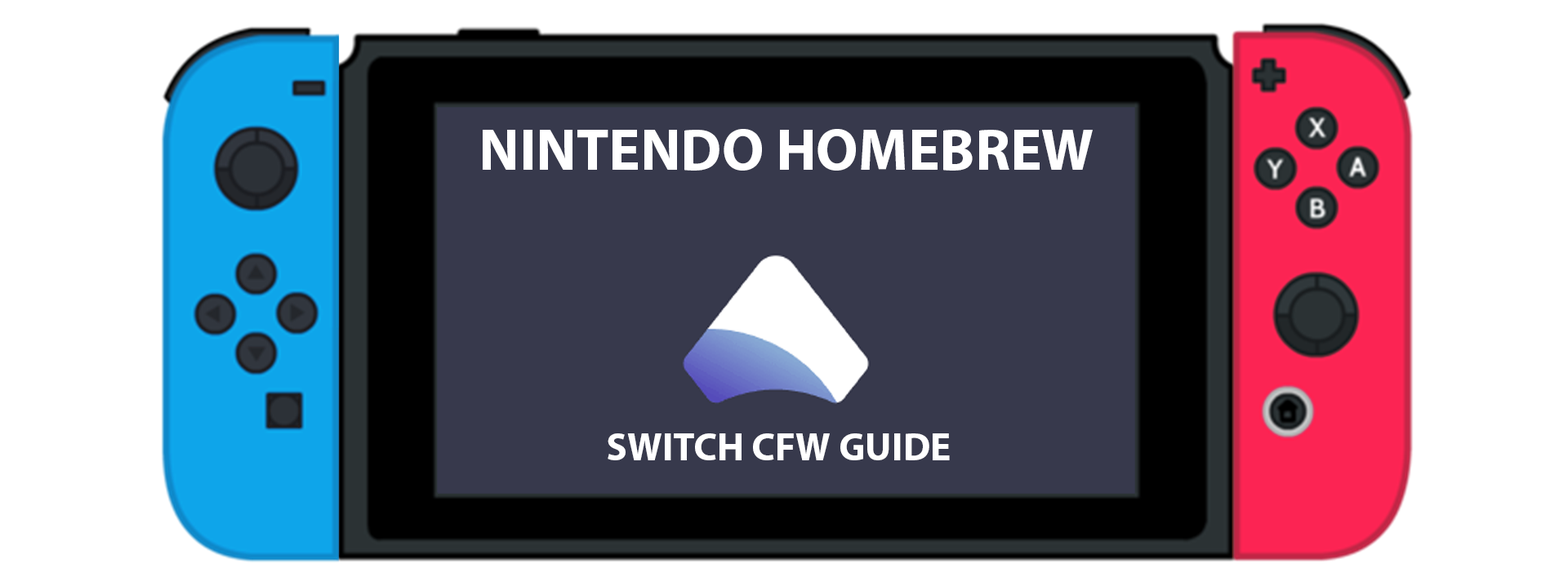
<style>
.page{position:relative;width:1568px;height:586px;background:#ffffff}
.page>*{position:absolute;margin:0}
.t1{font:58.8px "MyriadPro-Bold";color:#ffffff}
.t2{font:39.2px "MyriadPro-Bold";color:#ffffff}
</style>
<div class="page">
<p class="t1" style="left:483px;top:129px;width:610px;height:42px">NINTENDO HOMEBREW</p>
<p class="t2" style="left:608px;top:434px;width:342px;height:27px">SWITCH CFW GUIDE</p>
</div>
